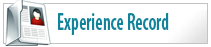
<style>
.page{position:relative;width:211px;height:47px;background:#ffffff}
.page>*{position:absolute;margin:0}
.t1{font:24px "MyriadPro-SemiboldCond";color:#11839a;scale:0.78 1}
</style>
<div class="page">
<p class="t1" style="left:58px;top:13px;width:111px;height:22px">Experience Record</p>
</div>
